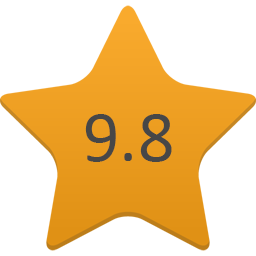
<style>
.page{position:relative;width:256px;height:256px;background:#ffffff}
.page>*{position:absolute;margin:0}
.t1{font:72px "Calibri";color:#474747}
</style>
<div class="page">
<p class="t1" style="left:85px;top:114px;width:87px;height:48px">9.8</p>
</div>
